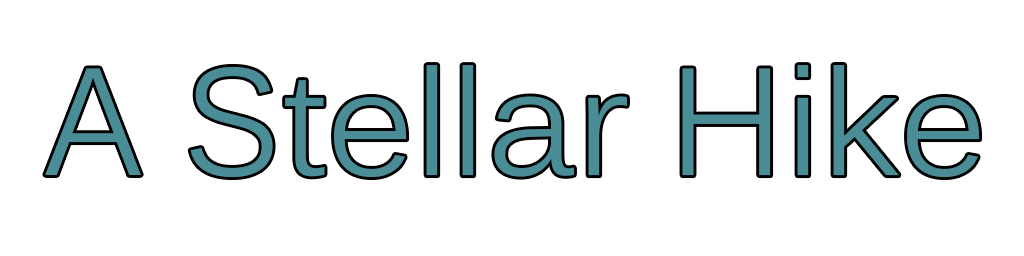
<style>
.page{position:relative;width:1024px;height:256px;background:#ffffff}
.page>*{position:absolute;margin:0}
.t1{font:150px "Kalinga";color:#4b8d97}
</style>
<div class="page">
<p class="t1" style="left:45px;top:65px;width:935px;height:112px">A Stellar Hike</p>
</div>
